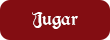
<style>
.page{position:relative;width:110px;height:40px;background:#830d12}
.page>*{position:absolute;margin:0}
.t1{font:13px "BerryRotunda-Regular";color:#ffffff}
</style>
<div class="page">
<p class="t1" style="left:32px;top:12px;width:46px;height:17px">Jugar</p>
</div>
